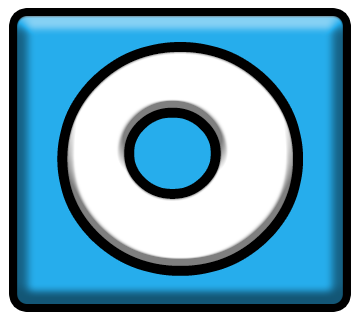
<style>
.page{position:relative;width:360px;height:320px;background:#ffffff}
.page>*{position:absolute;margin:0}
.t1{font:312.5px "Funhouse";color:#ffffff;scale:0.91 1}
</style>
<div class="page">
<p class="t1" style="left:67px;top:52px;width:226px;height:214px">0</p>
</div>
